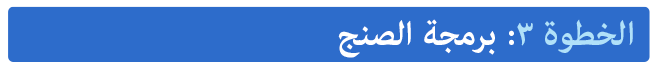
<style>
.page{position:relative;width:656px;height:72px;background:#2d6ccb}
.page>*{position:absolute;margin:0}
.t1{font:48px "AdobeArabic-Bold";color:#ffffff}
.t2{font:48px "AdobeArabic-Bold";color:#b0e1f9}
</style>
<div class="page">
<p class="t1" style="left:338px;top:19px;width:295px;height:39px"><span class="t2">الخطوة ٣</span>: برمجة الصنج</p>
</div>
